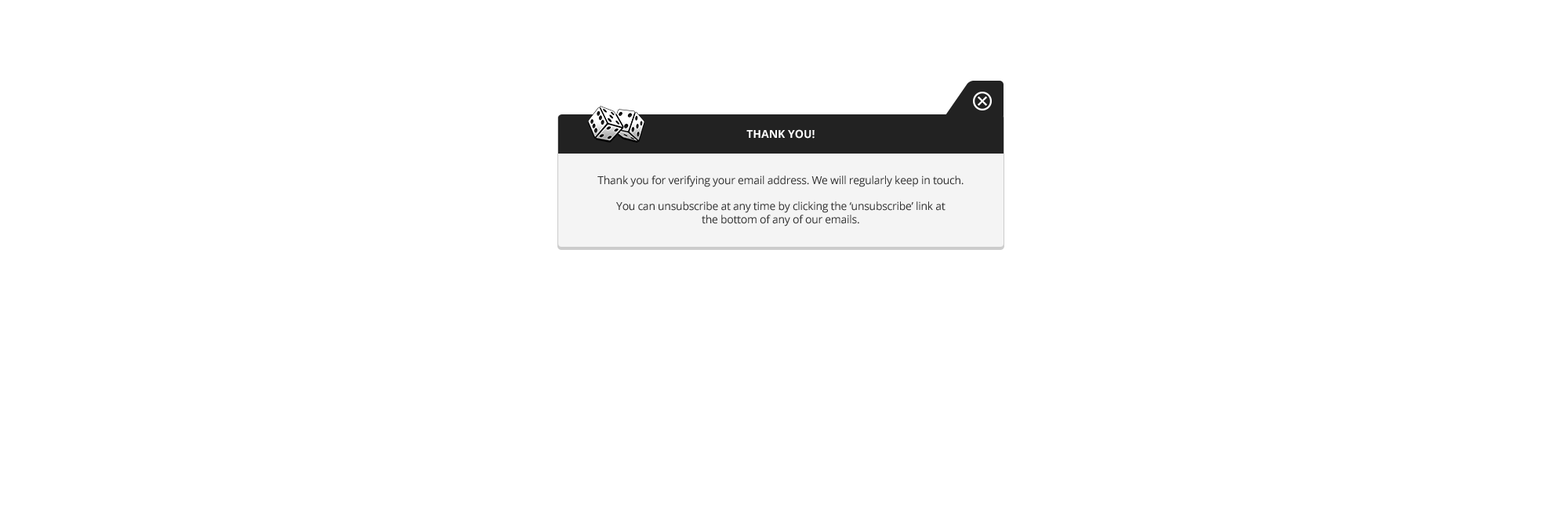
<style>
.page{position:relative;width:1568px;height:510px;background:#ffffff}
.page>*{position:absolute;margin:0}
.t1{font:11px "OpenSans-Bold";color:#ffffff;text-transform:uppercase}
.t2{font:11px "OpenSans";letter-spacing:-0.02em;color:#333333}
</style>
<div class="page">
<p class="t1" style="left:746px;top:129px;width:69px;height:10px">THANK YOU!</p>
<p class="t2" style="left:597px;top:176px;width:367px;height:51px;text-align:center">Thank you for verifying your email address. We will regularly keep in touch. <br><br>You can unsubscribe at any time by clicking the ‘unsubscribe’ link at <br>the bottom of any of our emails.</p>
</div>
